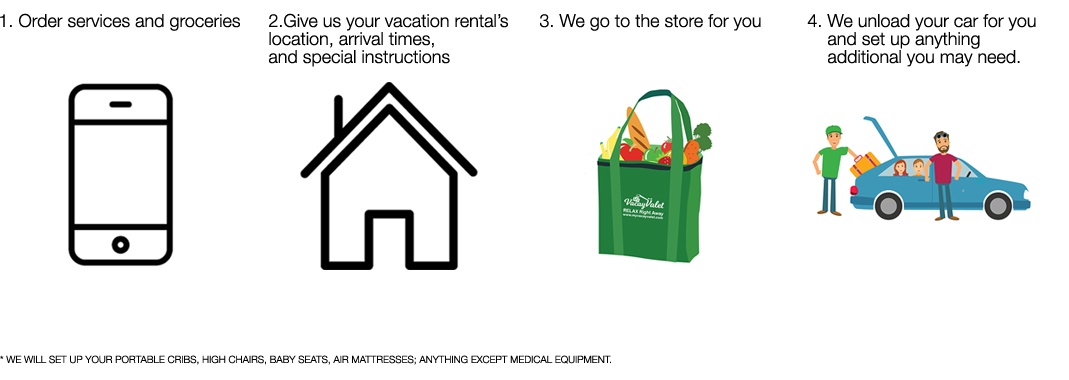
<style>
.page{position:relative;width:1069px;height:380px;background:#ffffff}
.page>*{position:absolute;margin:0}
.t1{font:18px "HelveticaNeue-Light";color:#000000}
.t2{font:18px/18px "HelveticaNeue-Light";color:#000000}
.t3{font:10px "HelveticaNeue-Light";color:#000000;text-transform:uppercase}
</style>
<div class="page">
<p class="t1" style="left:0px;top:13px;width:240px;height:18px">1. Order services and groceries</p>
<p class="t2" style="left:268px;top:13px;width:240px;height:54px">2.Give us your vacation rental’s <br>location, arrival times, <br>and special instructions</p>
<p class="t1" style="left:540px;top:14px;width:221px;height:17px">3. We go to the store for you</p>
<p class="t2" style="left:807px;top:14px;width:229px;height:53px">4. We unload your car for you <br>    and set up anything <br>    additional you may need.</p>
<p class="t3" style="left:0px;top:355px;width:611px;height:10px">* We will set up your portable cribs, high chairs, baby seats, air mattresses; anything except medical equipment.</p>
</div>
